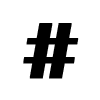
<style>
.page{position:relative;width:100px;height:100px;background:#ffffff}
.page>*{position:absolute;margin:0}
.t1{font:92px "BritannicBold";color:#000000;font-weight:bold}
</style>
<div class="page">
<p class="t1" style="left:23px;top:23px;width:56px;height:56px">#</p>
</div>
